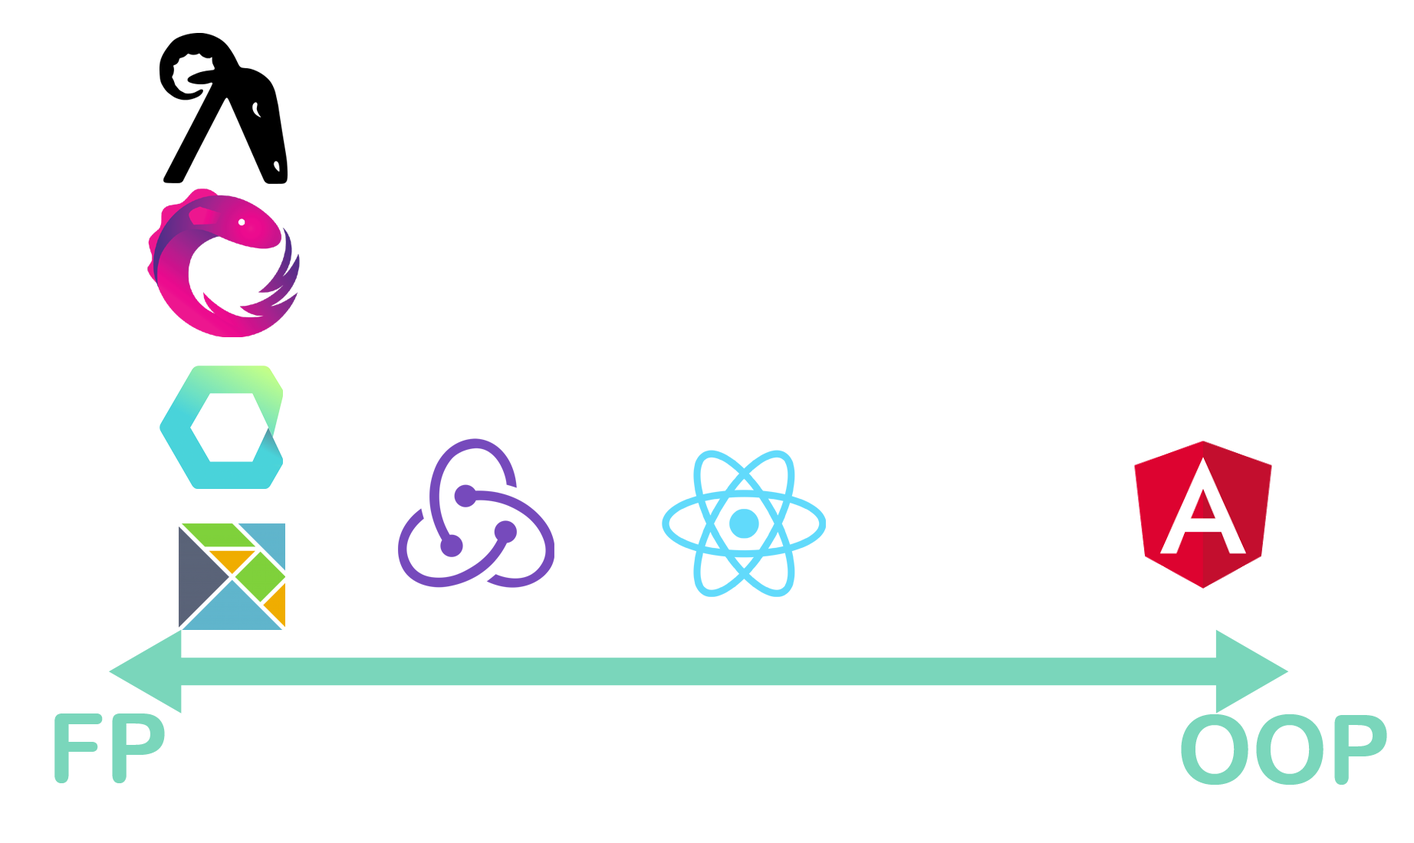
<style>
.page{position:relative;width:1414px;height:843px;background:#ffffff}
.page>*{position:absolute;margin:0}
.t1{font:95.1px "ArialRoundedMTBold";color:#7ad6bb}
</style>
<div class="page">
<p class="t1" style="left:54px;top:714px;width:111px;height:70px">FP</p>
<p class="t1" style="left:1181px;top:715px;width:206px;height:70px">OOP</p>
</div>
